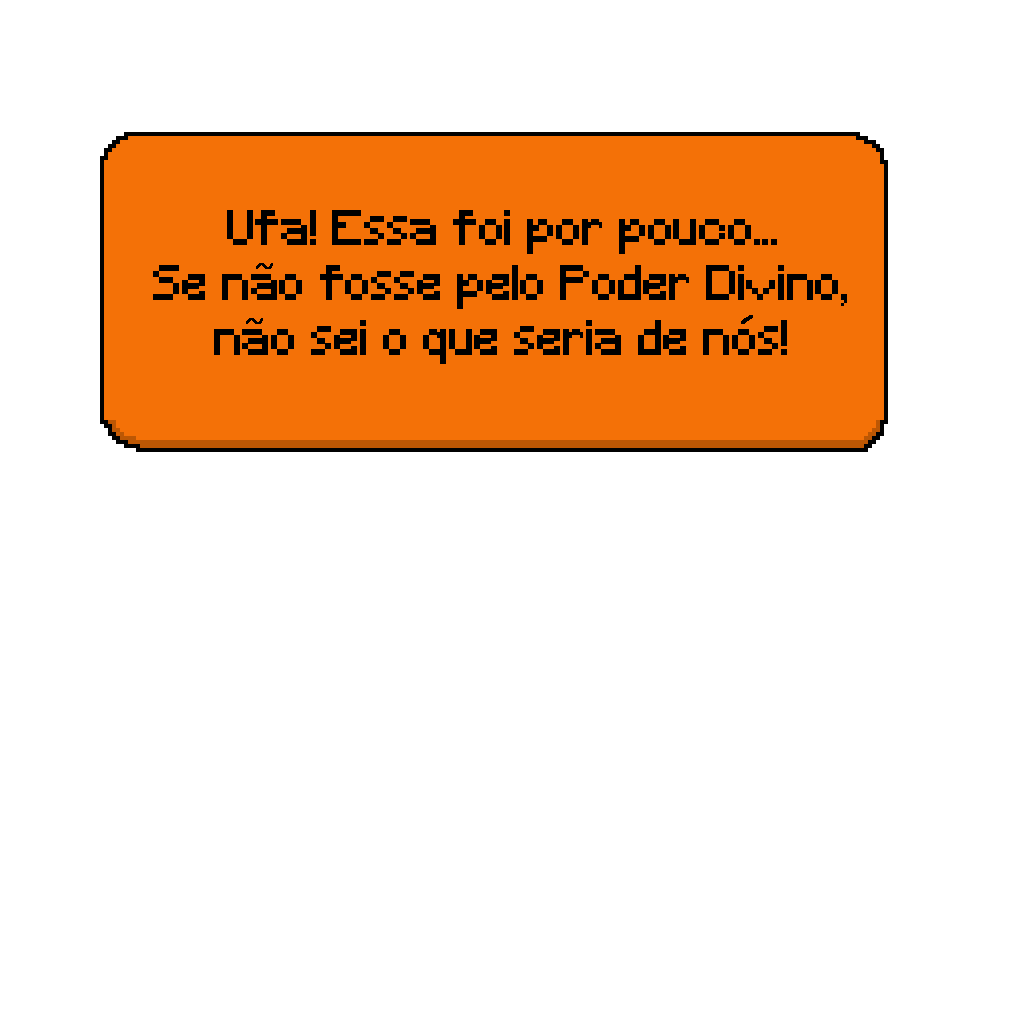
<style>
.page{position:relative;width:1024px;height:1024px;background:#ffffff}
.page>*{position:absolute;margin:0}
.t1{font:45.8px "Minecraft";color:#000000}
</style>
<div class="page">
<p class="t1" style="left:153px;top:210px;width:694px;height:154px;text-align:center">Ufa! Essa foi por pouco...<br>Se nao fosse pelo Poder Divino, nao sei o que seria de nos!</p>
</div>
